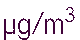
<style>
.page{position:relative;width:80px;height:40px;background:#ffffff}
.page>*{position:absolute;margin:0}
.t1{font:29.2px "Tuffy";color:#40033a}
.t2{font:20.8px "Tuffy";color:#40033a}
</style>
<div class="page">
<p class="t1" style="left:4px;top:12px;width:59px;height:28px">μg/m</p>
<p class="t2" style="left:65px;top:7px;width:10px;height:15px">3</p>
</div>
